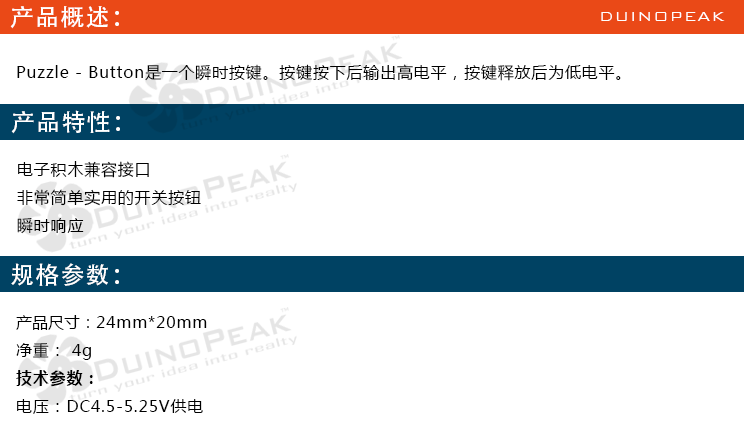
<style>
.page{position:relative;width:744px;height:425px;background:#ffffff}
.page>*{position:absolute;margin:0}
.t1{font:24px "AdobeHeitiStd-Regular";letter-spacing:0.05em;color:#ffffff}
.t2{font:18px "BankGothicBT-Light";letter-spacing:0.05em;color:#ffffff}
.t3{font:16px "MicrosoftYaHei";letter-spacing:0.05em;color:#000000}
.t4{font:16px "MicrosoftYaHei";color:#000000}
.t5{font:16px "MicrosoftYaHei-Bold";letter-spacing:0.05em;color:#000000}
</style>
<div class="page">
<p class="t1" style="left:10px;top:6px;width:109px;height:23px">产品概述：</p>
<p class="t2" style="left:601px;top:12px;width:124px;height:9px">DUINOPEAK</p>
<p class="t3" style="left:17px;top:64px;width:604px;height:17px">Puzzle - Button是一个瞬时按键。按键按下后输出高电平，按键释放后为低电平。</p>
<p class="t1" style="left:11px;top:110px;width:109px;height:24px">产品特性：</p>
<p class="t3" style="left:17px;top:161px;width:184px;height:73px">电子积木兼容接口<br>非常简单实用的开关按钮<br>瞬时响应</p>
<p class="t1" style="left:11px;top:263px;width:108px;height:23px">规格参数：</p>
<p class="t3" style="left:16px;top:315px;width:191px;height:99px"><span class="t4">产品尺寸：</span>24mm*20mm<br>净重： 4g<br><span class="t5">技术参数：<br></span>电压：DC4.5-5.25V供电</p>
</div>
